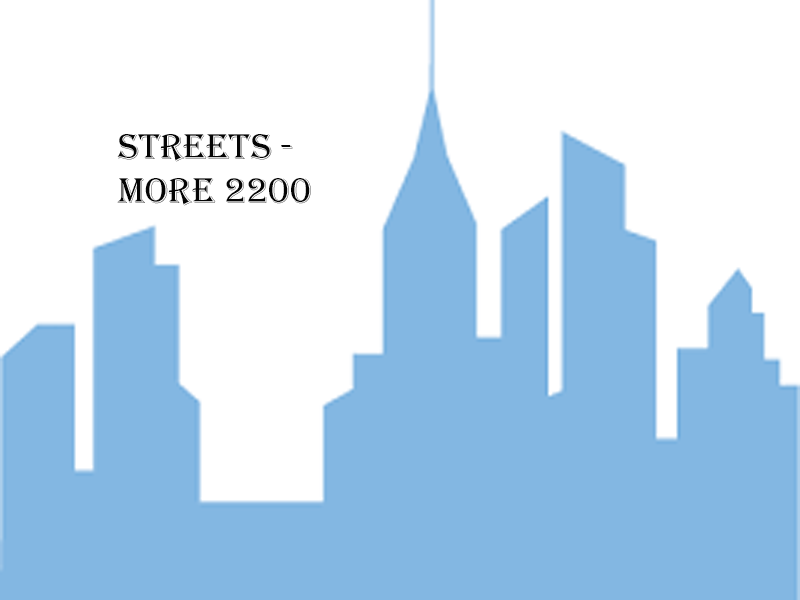
<style>
.page{position:relative;width:800px;height:600px;background:#ffffff}
.page>*{position:absolute;margin:0}
.t1{font:37px "Algerian";color:#050505}
</style>
<div class="page">
<p class="t1" style="left:117px;top:134px;width:194px;height:72px">streets - <br>More 2200</p>
</div>
